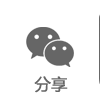
<style>
.page{position:relative;width:100px;height:100px;background:#ffffff}
.page>*{position:absolute;margin:0}
.t1{font:16px "MicrosoftYaHei";color:#666666;font-weight:bold}
</style>
<div class="page">
<p class="t1" style="left:34px;top:76px;width:34px;height:17px">分享</p>
</div>
